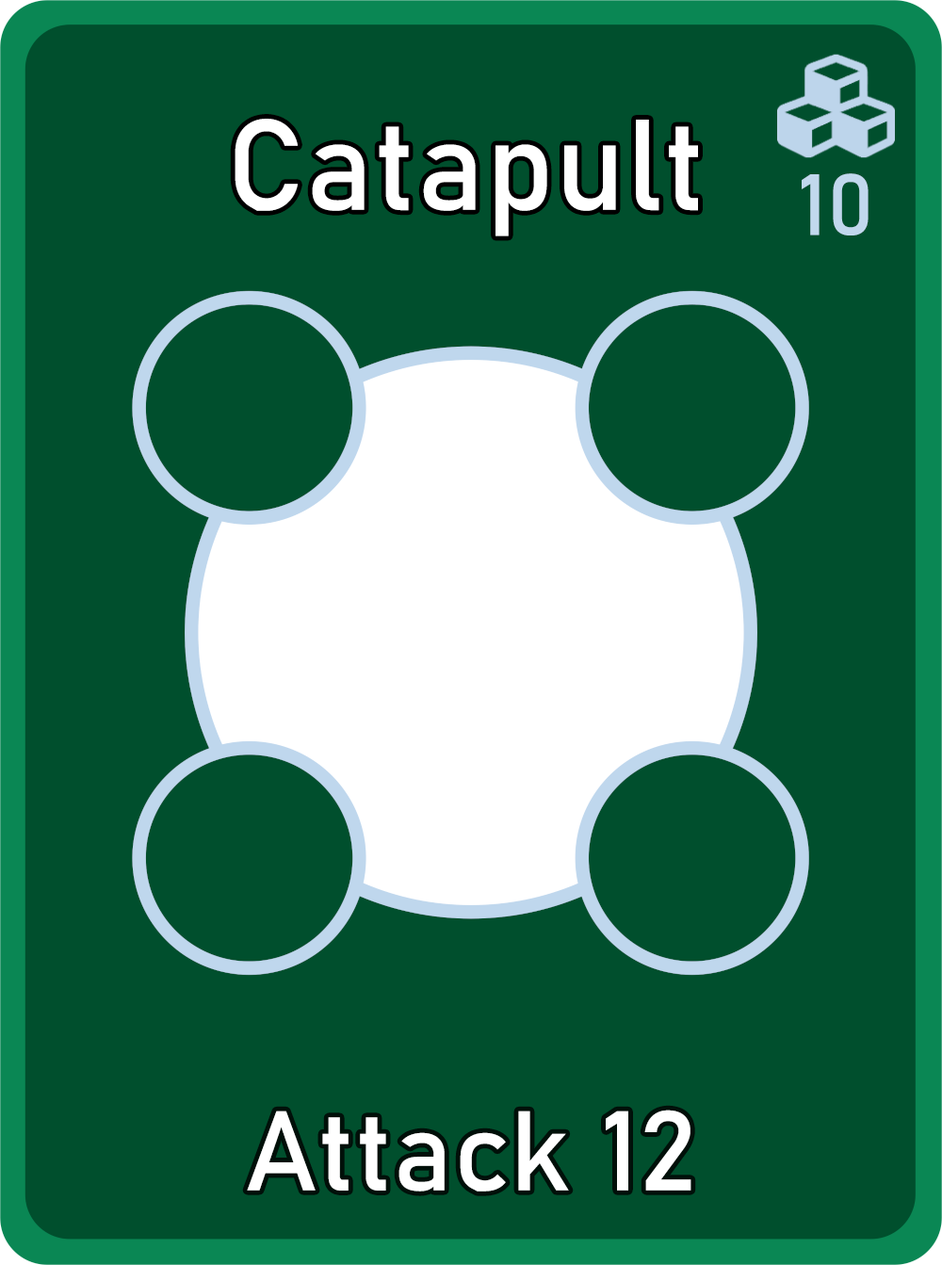
<style>
.page{position:relative;width:942px;height:1265px;background:#004f2d}
.page>*{position:absolute;margin:0}
.t1{font:126.7px "Bahnschrift";letter-spacing:0.01em;color:#ffffff}
.t2{font:85px "Bahnschrift";letter-spacing:0.01em;color:#c1d8ed}
.t3{font:111.3px "Bahnschrift";letter-spacing:0.01em;color:#ffffff}
</style>
<div class="page">
<p class="t1" style="left:235px;top:119px;width:463px;height:118px">Catapult</p>
<p class="t2" style="left:802px;top:173px;width:67px;height:63px">10</p>
<p class="t3" style="left:247px;top:1110px;width:445px;height:82px">Attack 12</p>
</div>
